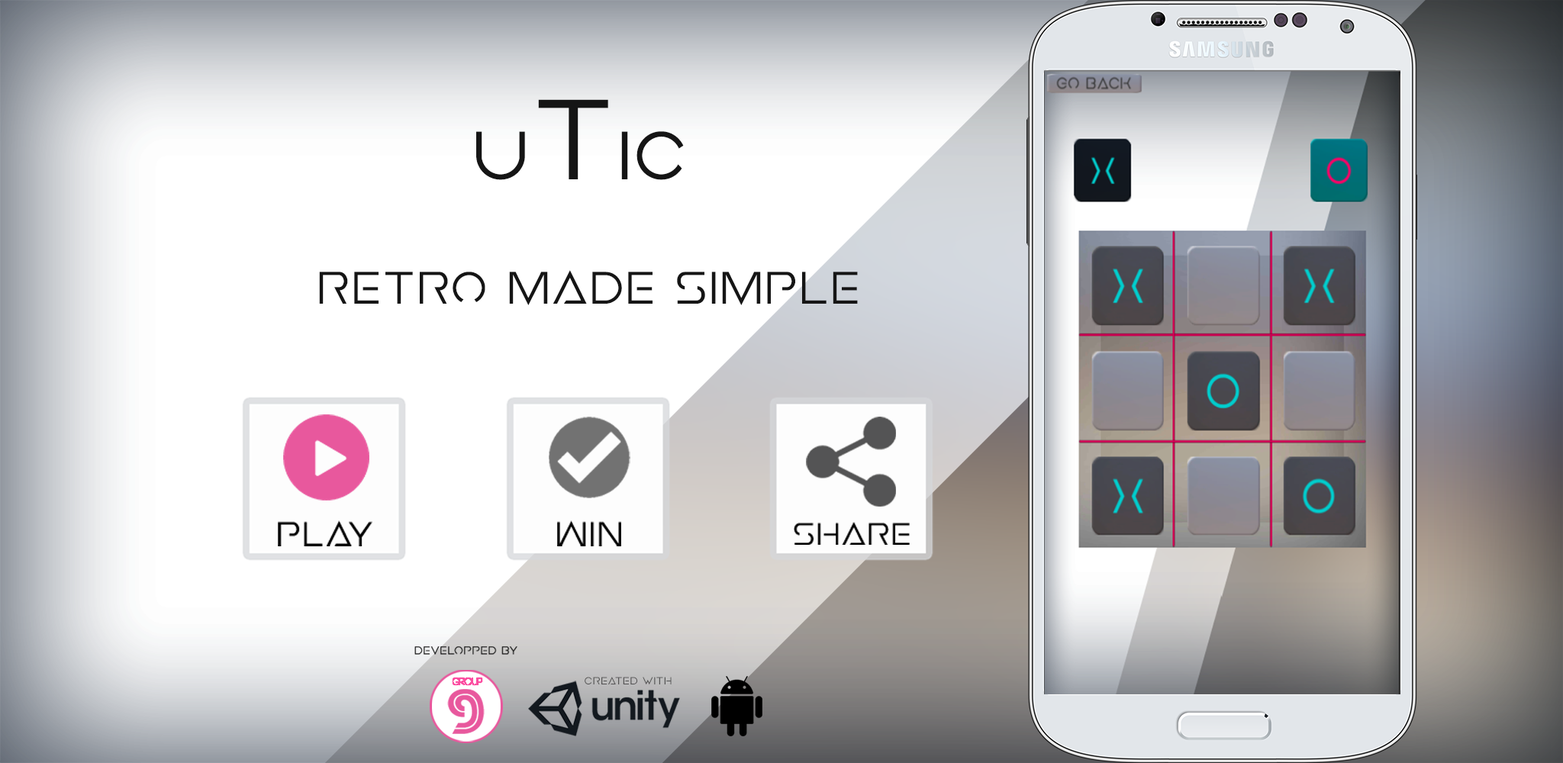
<style>
.page{position:relative;width:1563px;height:763px}
.page>*{position:absolute;margin:0}
.t1{font:76.3px "EarthOrbiter";color:#151515}
.t2{font:127.2px "EarthOrbiter";color:#151515}
.t3{font:50.9px "EarthOrbiter";color:#151515}
.t4{font:38.2px "EarthOrbiter";color:#000000}
.t5{font:35px "EarthOrbiter";color:#000000}
.t6{font:9.8px "Code-Light";color:#e8589d}
.t7{font:11.7px "EarthOrbiter";color:#525252}
.t8{font:55.8px "Battlestar";color:#e8589d}
</style>
<div class="page">
<p class="t1" style="left:476px;top:99px;width:208px;height:81px">u<span class="t2">T</span>ic</p>
<p class="t3" style="left:319px;top:270px;width:539px;height:35px">Retro made Simple</p>
<p class="t4" style="left:278px;top:520px;width:94px;height:26px">Play</p>
<p class="t4" style="left:557px;top:520px;width:64px;height:26px">Win</p>
<p class="t5" style="left:794px;top:522px;width:116px;height:23px">Share</p>
<p class="t6" style="left:452px;top:678px;width:30px;height:7px">group</p>
<p class="t7" style="left:584px;top:677px;width:87px;height:8px">Created with</p>
<p class="t8" style="left:447px;top:689px;width:38px;height:45px">9</p>
</div>
